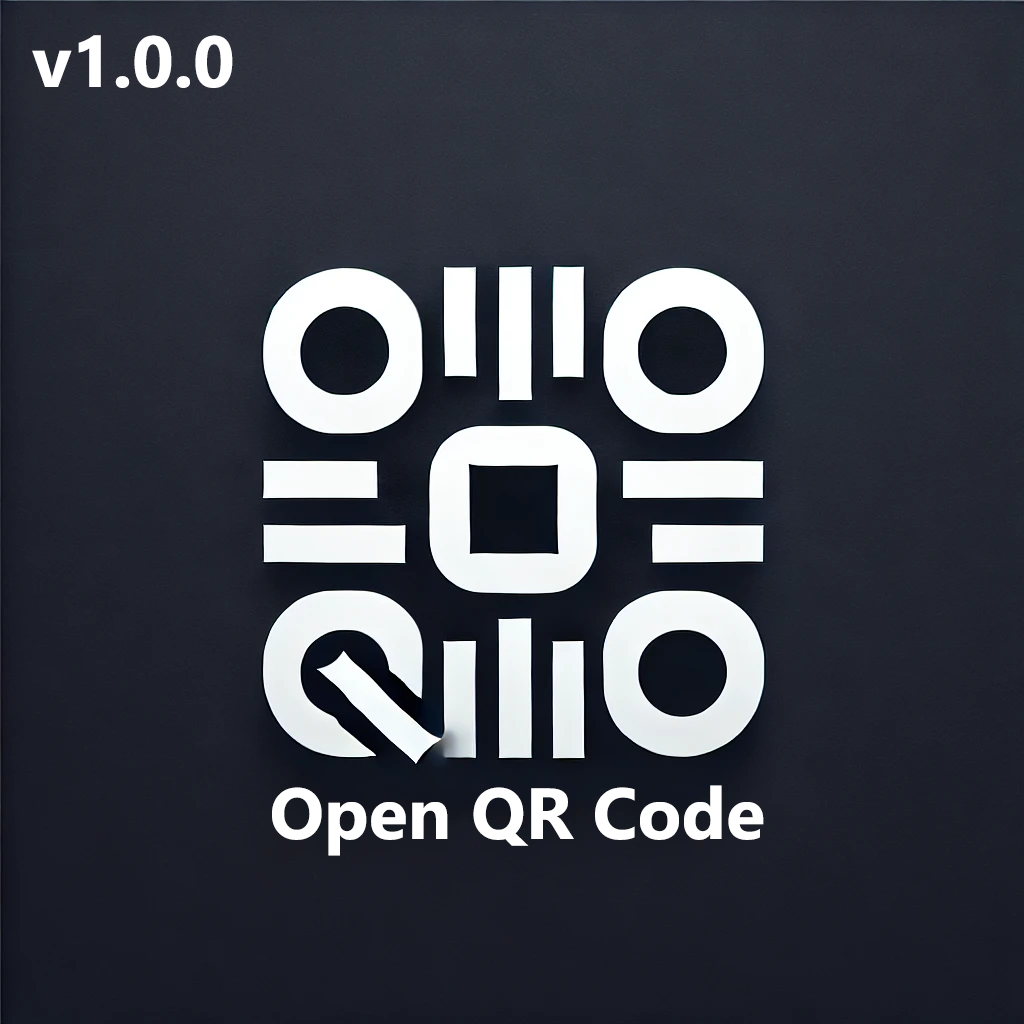
<style>
.page{position:relative;width:1024px;height:1024px}
.page>*{position:absolute;margin:0}
.t1{font:72px "SegoeUI-Bold";color:#ffffff}
</style>
<div class="page">
<p class="t1" style="left:32px;top:35px;width:201px;height:53px">v1.0.0</p>
<p class="t1" style="left:272px;top:785px;width:492px;height:71px">Open QR Code</p>
</div>
